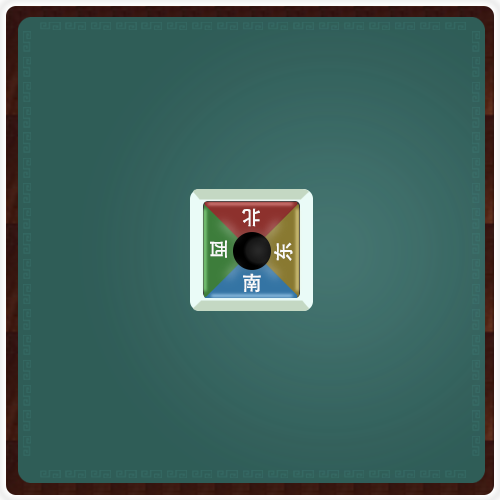
<style>
.page{position:relative;width:500px;height:500px}
.page>*{position:absolute;margin:0}
.t1{font:20.1px "AdobeHeitiStd-Regular";letter-spacing:0.16em;color:#fafafa}
.t2{font:20px "AdobeHeitiStd-Regular";letter-spacing:0.16em;color:#fafafa}
</style>
<div class="page">
<p class="t1" style="left:242px;top:208px;width:18px;height:19px;rotate:180deg">北</p>
<p class="t1" style="left:210px;top:240px;width:17px;height:18px;rotate:90deg">西</p>
<p class="t2" style="left:274px;top:242px;width:19px;height:19px;rotate:-90deg">东</p>
<p class="t1" style="left:243px;top:273px;width:18px;height:20px">南</p>
</div>
